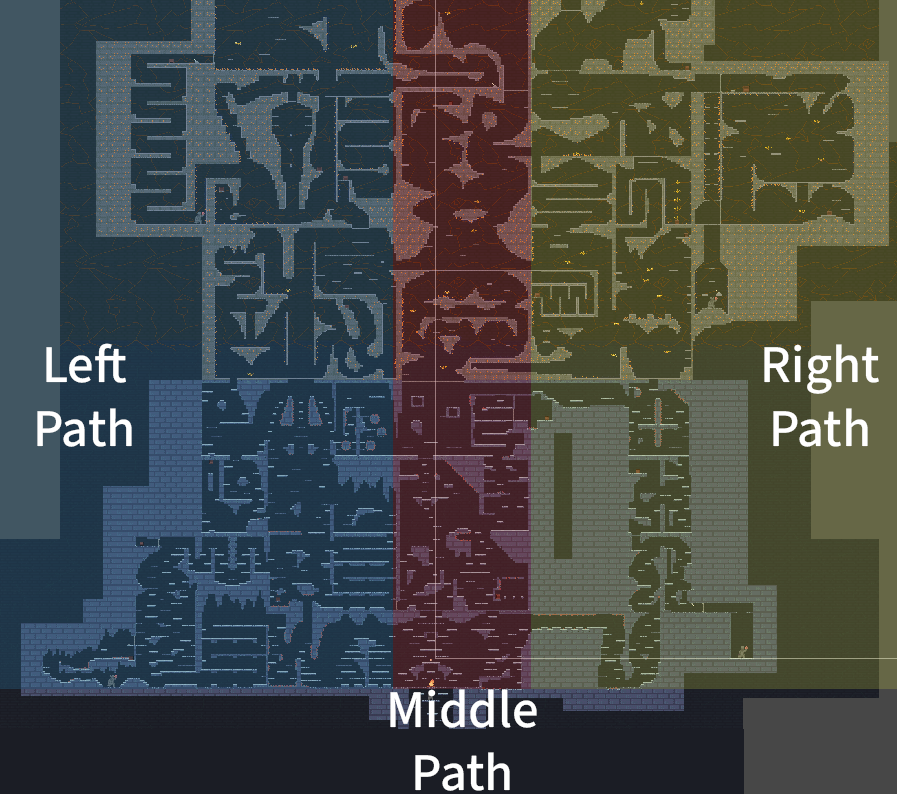
<style>
.page{position:relative;width:897px;height:794px}
.page>*{position:absolute;margin:0}
.t1{font:53px "SourceSans3-Medium";color:#ffffff}
</style>
<div class="page">
<p class="t1" style="left:37px;top:343px;width:95px;height:104px;text-align:center">Left Path</p>
<p class="t1" style="left:764px;top:344px;width:115px;height:103px;text-align:center">Right Path</p>
<p class="t1" style="left:390px;top:689px;width:147px;height:102px;text-align:center">Middle Path</p>
</div>
